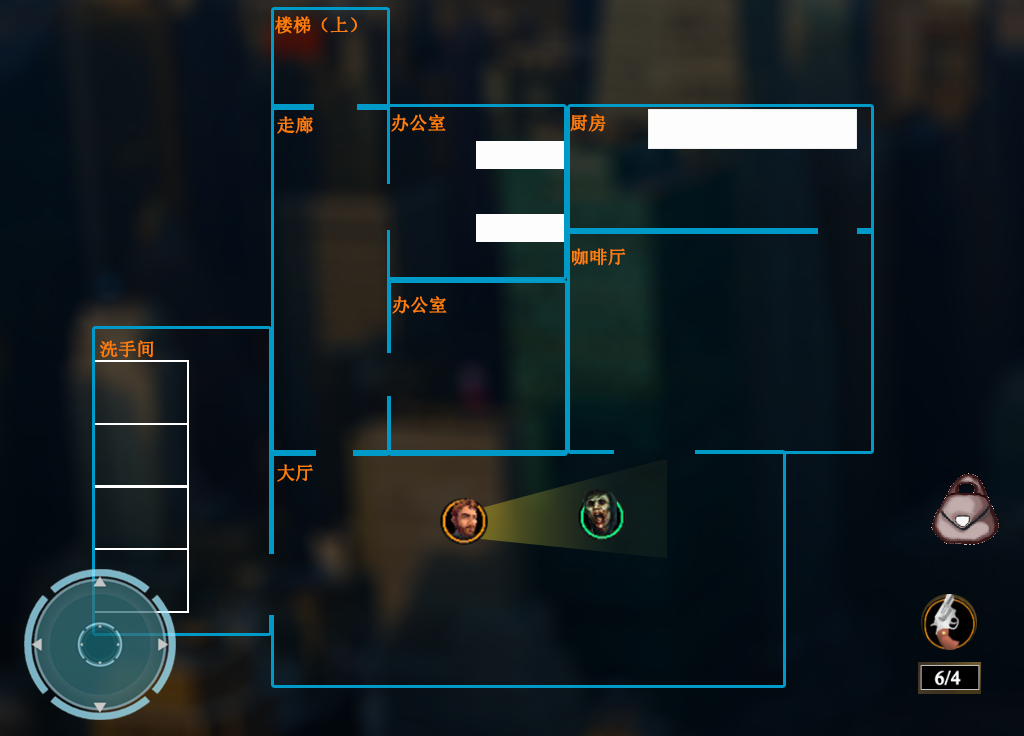
<style>
.page{position:relative;width:1024px;height:736px}
.page>*{position:absolute;margin:0}
.t1{font:18px "SimSun";color:#ff7d0a;font-weight:bold}
</style>
<div class="page">
<p class="t1" style="left:275px;top:16px;width:82px;height:18px">楼梯（上）</p>
<p class="t1" style="left:277px;top:116px;width:36px;height:18px">走廊</p>
<p class="t1" style="left:391px;top:114px;width:55px;height:18px">办公室</p>
<p class="t1" style="left:570px;top:114px;width:36px;height:18px">厨房</p>
<p class="t1" style="left:572px;top:248px;width:54px;height:18px">咖啡厅</p>
<p class="t1" style="left:392px;top:296px;width:55px;height:18px">办公室</p>
<p class="t1" style="left:100px;top:340px;width:54px;height:18px">洗手间</p>
<p class="t1" style="left:277px;top:464px;width:36px;height:18px">大厅</p>
</div>
